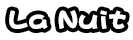
<style>
.page{position:relative;width:133px;height:40px;background:#ffffff}
.page>*{position:absolute;margin:0}
.t1{font:28px "DFPHaiBaoW12";letter-spacing:-0.005em;color:#ffffff}
</style>
<div class="page">
<p class="t1" style="left:9px;top:10px;width:117px;height:19px">La Nuit</p>
</div>
